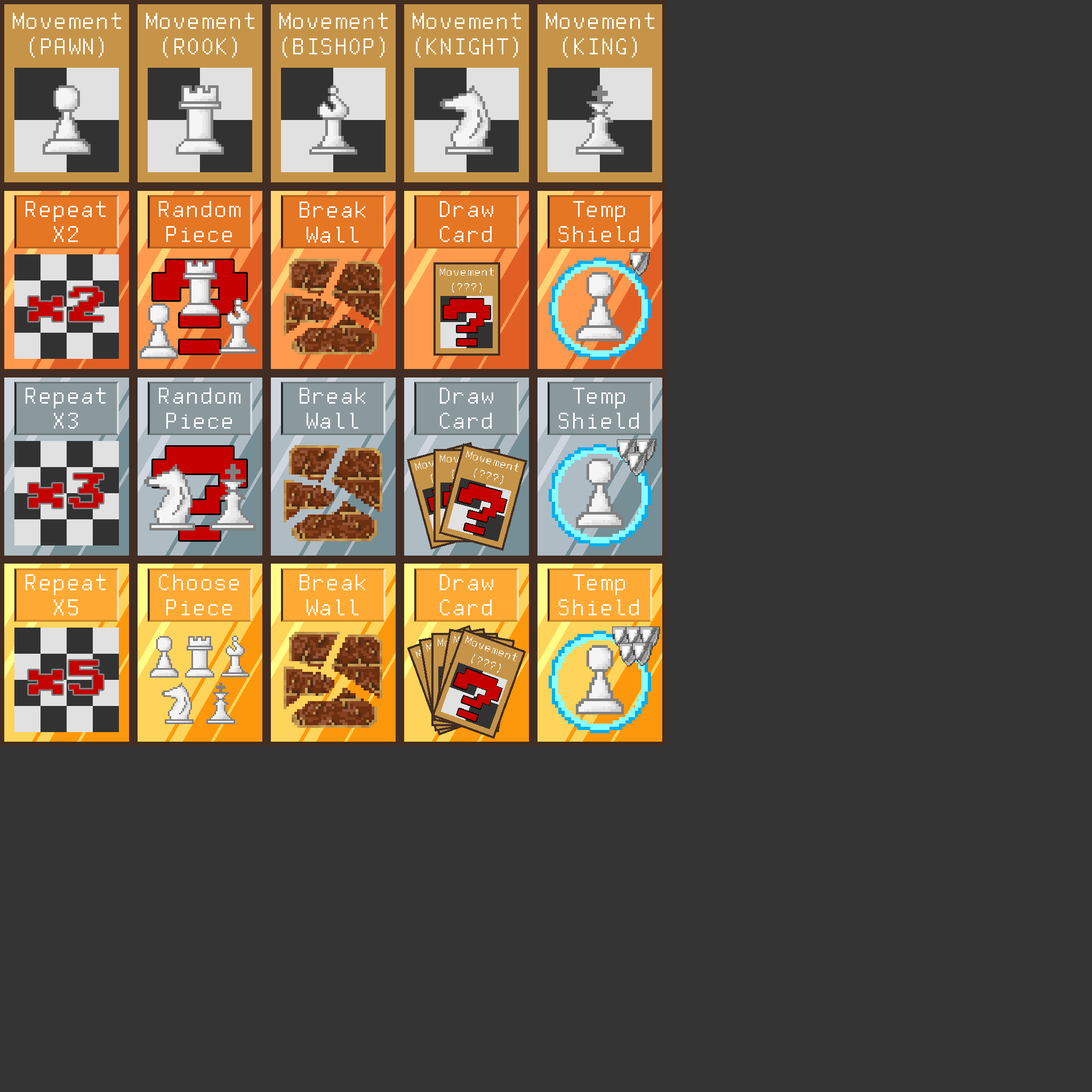
<style>
.page{position:relative;width:1092px;height:1092px;background:#333333}
.page>*{position:absolute;margin:0}
.t1{font:25.6px "FreePixel-Regular";letter-spacing:0.05em;color:#ffffff}
.t2{font:106.6px "PressStart2P";letter-spacing:0.05em;color:#c40000}
.t3{font:38.4px "PressStart2P";letter-spacing:0.05em;color:#c40000}
</style>
<div class="page">
<p class="t1" style="left:13px;top:13px;width:108px;height:45px;text-align:center">Movement<br>(PAWN)</p>
<p class="t1" style="left:146px;top:13px;width:108px;height:45px;text-align:center">Movement<br>(ROOK)</p>
<p class="t1" style="left:279px;top:13px;width:109px;height:45px;text-align:center">Movement<br>(BISHOP)</p>
<p class="t1" style="left:413px;top:13px;width:108px;height:45px;text-align:center">Movement<br>(KNIGHT)</p>
<p class="t1" style="left:546px;top:13px;width:108px;height:45px;text-align:center">Movement<br>(KING)</p>
<p class="t1" style="left:26px;top:201px;width:80px;height:41px;text-align:center">Repeat<br>X2</p>
<p class="t1" style="left:159px;top:201px;width:81px;height:41px;text-align:center">Random<br>Piece</p>
<p class="t1" style="left:300px;top:202px;width:65px;height:41px;text-align:center">Break<br>Wall</p>
<p class="t1" style="left:440px;top:201px;width:53px;height:41px;text-align:center">Draw<br>Card</p>
<p class="t1" style="left:559px;top:201px;width:80px;height:41px;text-align:center">Temp<br>Shield</p>
<p class="t2" style="left:153px;top:260px;width:93px;height:94px">?</p>
<p class="t3" style="left:29px;top:287px;width:74px;height:34px">x2</p>
<p class="t1" style="left:26px;top:388px;width:80px;height:41px;text-align:center">Repeat<br>X3</p>
<p class="t1" style="left:159px;top:388px;width:81px;height:41px;text-align:center">Random<br>Piece</p>
<p class="t1" style="left:300px;top:388px;width:65px;height:41px;text-align:center">Break<br>Wall</p>
<p class="t1" style="left:440px;top:388px;width:53px;height:41px;text-align:center">Draw<br>Card</p>
<p class="t1" style="left:559px;top:388px;width:80px;height:41px;text-align:center">Temp<br>Shield</p>
<p class="t2" style="left:153px;top:447px;width:93px;height:93px">?</p>
<p class="t3" style="left:29px;top:474px;width:74px;height:34px">x3</p>
<p class="t1" style="left:26px;top:574px;width:80px;height:41px;text-align:center">Repeat<br>X5</p>
<p class="t1" style="left:159px;top:574px;width:80px;height:41px;text-align:center">Choose<br>Piece</p>
<p class="t1" style="left:300px;top:574px;width:65px;height:41px;text-align:center">Break<br>Wall</p>
<p class="t1" style="left:440px;top:574px;width:53px;height:41px;text-align:center">Draw<br>Card</p>
<p class="t1" style="left:559px;top:574px;width:80px;height:41px;text-align:center">Temp<br>Shield</p>
<p class="t3" style="left:29px;top:661px;width:74px;height:33px">x5</p>
</div>
